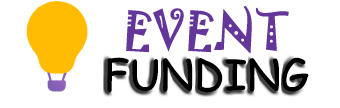
<style>
.page{position:relative;width:340px;height:108px;background:#ffffff}
.page>*{position:absolute;margin:0}
.t1{font:48px "Jokerman-Regular";color:#64369a}
.t2{font:42px "ComicSansMS";color:#000000}
</style>
<div class="page">
<p class="t1" style="left:126px;top:6px;width:163px;height:48px">EVENT</p>
<p class="t2" style="left:107px;top:57px;width:202px;height:36px">FUNDING</p>
</div>
